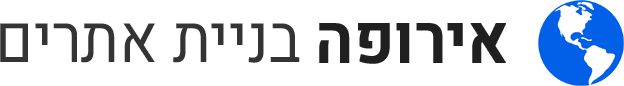
<style>
.page{position:relative;width:624px;height:86px;background:#ffffff}
.page>*{position:absolute;margin:0}
.t1{font:67px "Heebo-Regular";color:#343434;scale:0.9 1}
.t2{font:67px "Heebo-Medium";color:#202020;font-weight:bold;scale:0.9 1}
</style>
<div class="page">
<p class="t1" style="left:0px;top:23px;width:506px;height:41px">םירתא תיינב <span class="t2">הפוריא</span></p>
</div>
